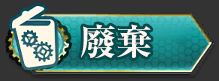
<style>
.page{position:relative;width:219px;height:81px;background:#333333}
.page>*{position:absolute;margin:0}
.t1{font:36px "RyuminPr6N-ExBold";color:#fff6f1}
</style>
<div class="page">
<p class="t1" style="left:81px;top:24px;width:70px;height:34px">廢棄</p>
</div>
